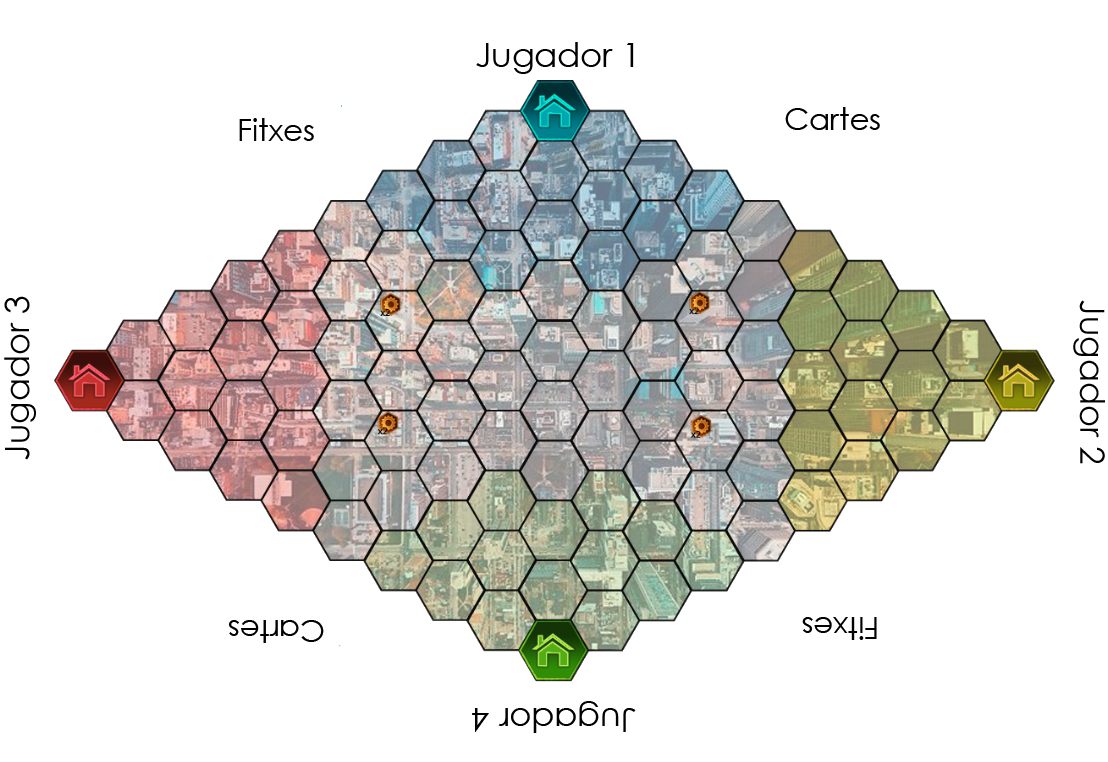
<style>
.page{position:relative;width:1108px;height:762px;background:#ffffff}
.page>*{position:absolute;margin:0}
.t1{font:33.6px "CenturyGothic";color:#000000}
.t2{font:30.6px "CenturyGothic";color:#000000}
</style>
<div class="page">
<p class="t1" style="left:476px;top:42px;width:158px;height:32px">Jugador 1</p>
<p class="t2" style="left:785px;top:107px;width:95px;height:23px">Cartes</p>
<p class="t2" style="left:239px;top:118px;width:75px;height:23px">Fitxes</p>
<p class="t1" style="left:4px;top:296px;width:32px;height:164px;rotate:-90deg">Jugador 3</p>
<p class="t1" style="left:1073px;top:300px;width:32px;height:164px;rotate:90deg">Jugador 2</p>
<p class="t2" style="left:802px;top:617px;width:75px;height:23px;rotate:180deg">Fitxes</p>
<p class="t2" style="left:228px;top:620px;width:96px;height:23px;rotate:180deg">Cartes</p>
<p class="t1" style="left:472px;top:701px;width:164px;height:32px;rotate:180deg">Jugador 4</p>
</div>
